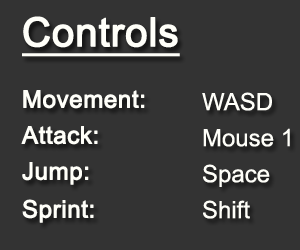
<style>
.page{position:relative;width:300px;height:250px;background:#333333}
.page>*{position:absolute;margin:0}
.t1{font:40px "ArialMT";color:#fffff9;font-weight:bold;text-decoration:underline}
.t2{font:24px "ArialMT";color:#fffff9;font-weight:bold}
.t3{font:24px "ArialMT";color:#fffff9}
</style>
<div class="page">
<p class="t1" style="left:22px;top:16px;width:158px;height:41px">Controls</p>
<p class="t2" style="left:23px;top:90px;width:122px;height:19px">Movement:</p>
<p class="t3" style="left:202px;top:92px;width:70px;height:19px">WASD</p>
<p class="t2" style="left:21px;top:126px;width:77px;height:19px">Attack:</p>
<p class="t3" style="left:203px;top:128px;width:87px;height:19px">Mouse 1</p>
<p class="t2" style="left:22px;top:162px;width:67px;height:23px">Jump:</p>
<p class="t3" style="left:203px;top:164px;width:67px;height:23px">Space</p>
<p class="t2" style="left:22px;top:199px;width:72px;height:24px">Sprint:</p>
<p class="t3" style="left:203px;top:200px;width:47px;height:19px">Shift</p>
</div>
